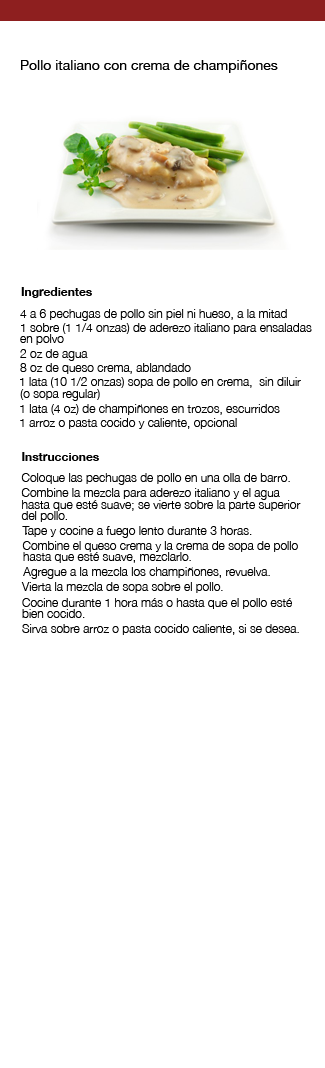
<style>
.page{position:relative;width:325px;height:1068px;background:#ffffff}
.page>*{position:absolute;margin:0}
.t1{font:14px "HelveticaNeue";color:#000000}
.t2{font:12px "HelveticaNeue-Bold";color:#000000}
.t3{font:12px "HelveticaNeue-Light";color:#000000}
</style>
<div class="page">
<p class="t1" style="left:21px;top:60px;width:257px;height:13px">Pollo italiano con crema de champiñones</p>
<p class="t2" style="left:21px;top:287px;width:71px;height:11px">Ingredientes</p>
<p class="t3" style="left:20px;top:309px;width:267px;height:12px">4 a 6 pechugas de pollo sin piel ni hueso, a la mitad</p>
<p class="t3" style="left:21px;top:323px;width:291px;height:11px">1 sobre (1 1/4 onzas) de aderezo italiano para ensaladas</p>
<p class="t3" style="left:20px;top:334px;width:44px;height:11px">en polvo</p>
<p class="t3" style="left:20px;top:349px;width:68px;height:12px">2 oz de agua</p>
<p class="t3" style="left:20px;top:363px;width:171px;height:11px">8 oz de queso crema, ablandado</p>
<p class="t3" style="left:20px;top:377px;width:281px;height:11px">1 lata (10 1/2 onzas) sopa de pollo en crema,  sin diluir</p>
<p class="t3" style="left:20px;top:389px;width:80px;height:12px">(o sopa regular)</p>
<p class="t3" style="left:20px;top:404px;width:260px;height:11px">1 lata (4 oz) de champiñones en trozos, escurridos</p>
<p class="t3" style="left:20px;top:418px;width:217px;height:11px">1 arroz o pasta cocido y caliente, opcional</p>
<p class="t2" style="left:22px;top:452px;width:77px;height:9px">Instrucciones</p>
<p class="t3" style="left:21px;top:473px;width:269px;height:23px">Coloque las pechugas de pollo en una olla de barro.<br>.</p>
<p class="t3" style="left:21px;top:488px;width:259px;height:12px">Combine la mezcla para aderezo italiano y el agua</p>
<p class="t3" style="left:22px;top:500px;width:279px;height:11px">hasta que esté suave; se vierte sobre la parte superior</p>
<p class="t3" style="left:21px;top:511px;width:46px;height:23px">del pollo.<br> .</p>
<p class="t3" style="left:22px;top:526px;width:230px;height:12px">Tape y cocine a fuego lento durante 3 horas.</p>
<p class="t3" style="left:22px;top:541px;width:276px;height:11px">Combine el queso crema y la crema de sopa de pollo</p>
<p class="t3" style="left:23px;top:552px;width:168px;height:11px">hasta que esté suave, mezclarlo.</p>
<p class="t3" style="left:23px;top:567px;width:247px;height:12px">Agregue a la mezcla los champiñones, revuelva.</p>
<p class="t3" style="left:21px;top:582px;width:202px;height:11px">Vierta la mezcla de sopa sobre el pollo.</p>
<p class="t3" style="left:22px;top:598px;width:270px;height:11px">Cocine durante 1 hora más o hasta que el pollo esté</p>
<p class="t3" style="left:22px;top:609px;width:63px;height:9px">bien cocido.</p>
<p class="t3" style="left:22px;top:624px;width:277px;height:11px">Sirva sobre arroz o pasta cocido caliente, si se desea.</p>
</div>
